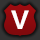
<style>
.page{position:relative;width:40px;height:40px}
.page>*{position:absolute;margin:0}
.t1{font:25.7px "Roboto-Bold";color:#ffffff;scale:1.1 1}
</style>
<div class="page">
<p class="t1" style="left:11px;top:10px;width:18px;height:19px">V</p>
</div>
